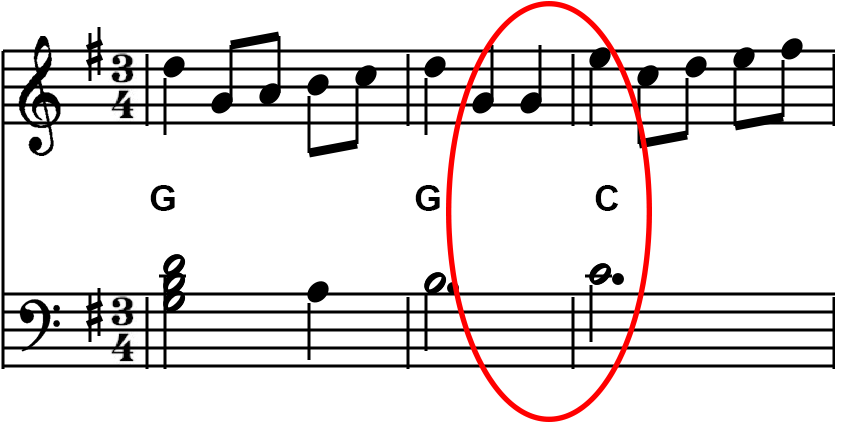
<style>
.page{position:relative;width:842px;height:422px;background:#ffffff}
.page>*{position:absolute;margin:0}
.t1{font:36px "Arial-BoldMT";letter-spacing:0.1em;color:#000000}
</style>
<div class="page">
<p class="t1" style="left:150px;top:185px;width:25px;height:26px">G</p>
<p class="t1" style="left:415px;top:185px;width:25px;height:26px">G</p>
<p class="t1" style="left:595px;top:185px;width:24px;height:26px">C</p>
</div>
